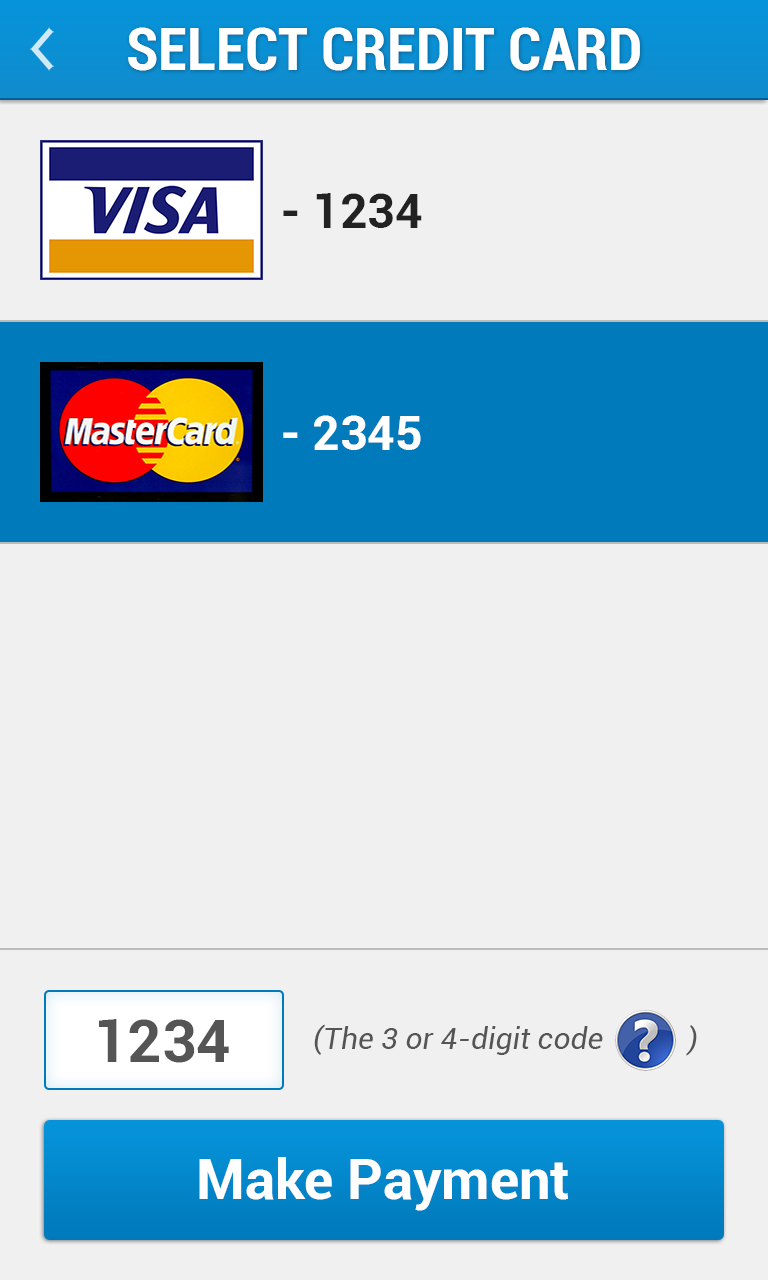
<style>
.page{position:relative;width:768px;height:1280px;background:#f0f0f0}
.page>*{position:absolute;margin:0}
.t1{font:60px "Roboto-BoldCondensed";color:#ffffff}
.t2{font:48px "Roboto-Bold";color:#222222}
.t3{font:48px "Roboto-Bold";color:#fefefe}
.t4{font:60px "Roboto-Bold";color:#555555}
.t5{font:30px "Roboto-Italic";color:#555555}
.t6{font:56px "Roboto-Bold";color:#ffffff}
</style>
<div class="page">
<p class="t1" style="left:128px;top:27px;width:512px;height:44px">SELECT CREDIT CARD</p>
<p class="t2" style="left:283px;top:193px;width:139px;height:35px">- 1234</p>
<p class="t3" style="left:283px;top:415px;width:138px;height:35px">- 2345</p>
<p class="t4" style="left:99px;top:1019px;width:130px;height:44px">1234</p>
<p class="t5" style="left:314px;top:1024px;width:383px;height:32px">(The 3 or 4-digit code    )</p>
<p class="t6" style="left:199px;top:1157px;width:369px;height:54px">Make Payment</p>
</div>
